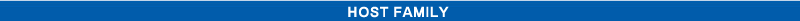
<style>
.page{position:relative;width:800px;height:21px;background:#015cab}
.page>*{position:absolute;margin:0}
.t1{font:14px "Catriel-Bold";letter-spacing:0.04em;color:#ffffff}
</style>
<div class="page">
<p class="t1" style="left:348px;top:6px;width:101px;height:12px">HOST FAMILY</p>
</div>
